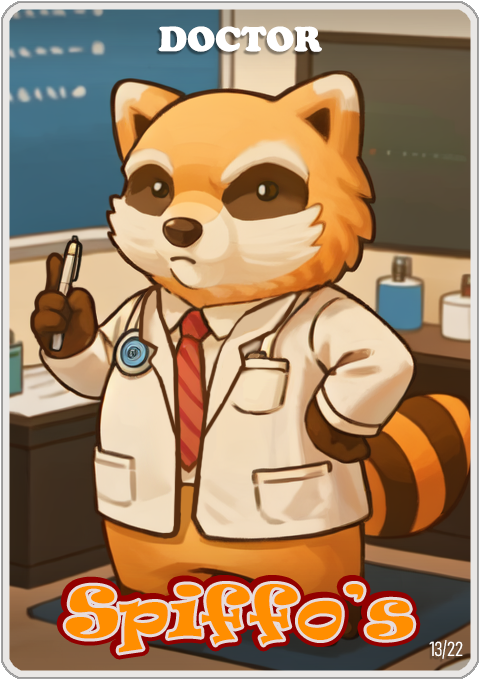
<style>
.page{position:relative;width:480px;height:680px}
.page>*{position:absolute;margin:0}
.t1{font:36px "CooperBlack";color:#ffffff}
.t2{font:65px "Ravie";color:#ff8e00}
.t3{font:20px "Bahnschrift-LightCondensed";color:#ffffff}
</style>
<div class="page">
<p class="t1" style="left:158px;top:26px;width:164px;height:26px">DOCTOR</p>
<p class="t2" style="left:65px;top:584px;width:349px;height:69px">Spiffo’s</p>
<p class="t3" style="left:429px;top:640px;width:34px;height:19px">13/22</p>
</div>
